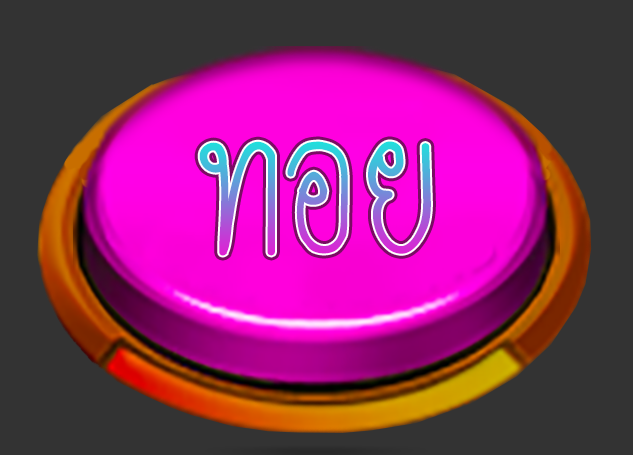
<style>
.page{position:relative;width:633px;height:455px;background:#333333}
.page>*{position:absolute;margin:0}
.t1{font:300.6px "7761BluemoonUptome"}
</style>
<div class="page">
<p class="t1" style="left:199px;top:141px;width:232px;height:115px">ทอย</p>
</div>
